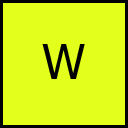
<style>
.page{position:relative;width:128px;height:128px;background:#e3ff1c}
.page>*{position:absolute;margin:0}
.t1{font:48px "Tahoma";color:#000000}
</style>
<div class="page">
<p class="t1" style="left:42px;top:44px;width:43px;height:35px">W</p>
</div>
